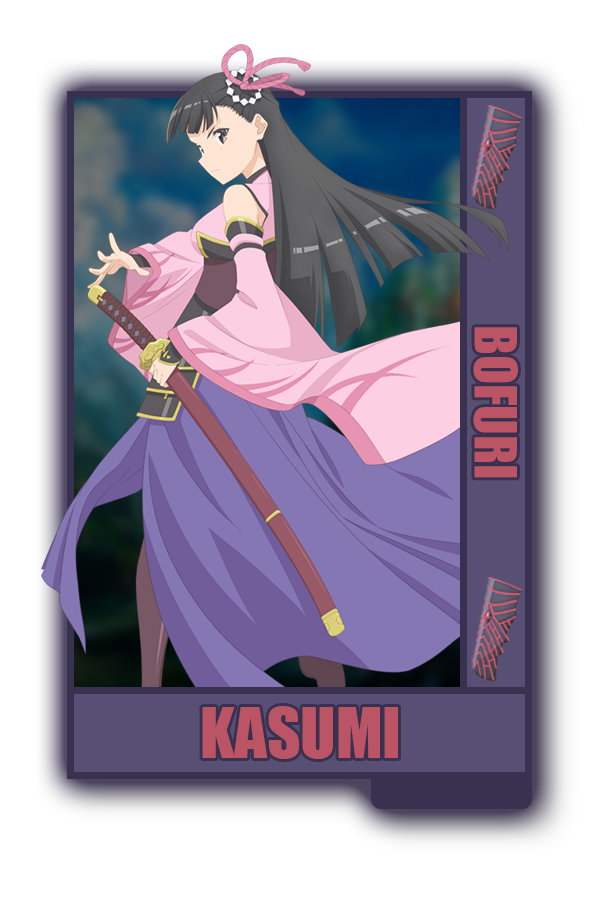
<style>
.page{position:relative;width:600px;height:900px;background:#ffffff}
.page>*{position:absolute;margin:0}
.t1{font:53.6px "Impact";color:#bb5464}
.t2{font:64.6px "Impact";color:#bb5464}
</style>
<div class="page">
<p class="t1" style="left:473px;top:327px;width:45px;height:151px;rotate:90deg">BOFURI</p>
<p class="t2" style="left:202px;top:706px;width:196px;height:53px">KASUMI</p>
</div>
